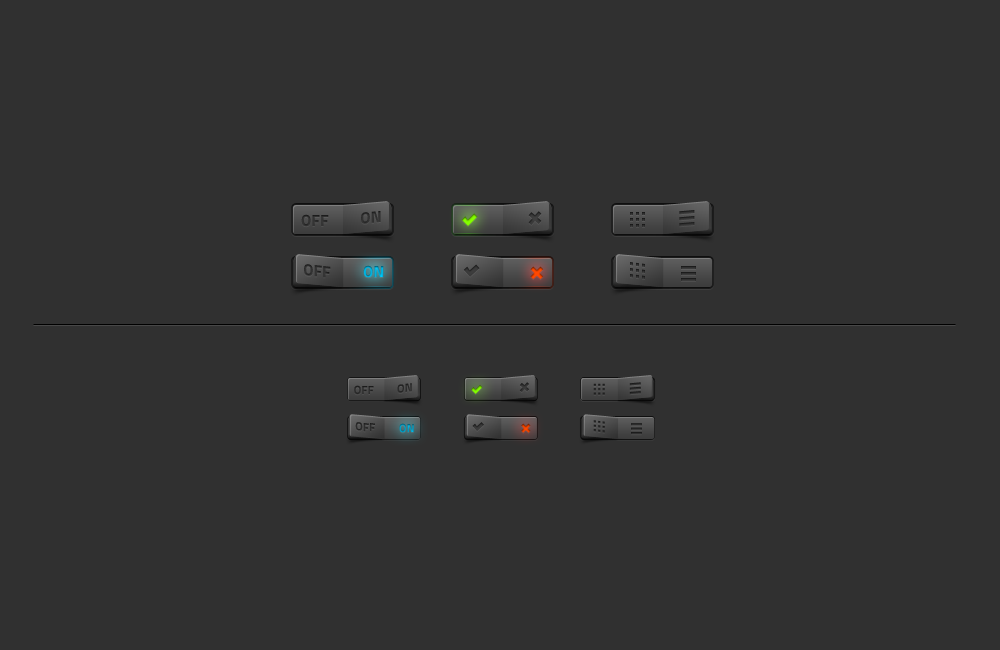
<style>
.page{position:relative;width:1000px;height:650px;background:#303030}
.page>*{position:absolute;margin:0}
.t1{font:16px "TitilliumMaps29L-999wt";color:#313131}
.t2{font:16px "TitilliumMaps29L-999wt";color:#00aed9}
.t3{font:11.7px "TitilliumMaps29L-999wt";color:#313131}
.t4{font:11.7px "TitilliumMaps29L-999wt"}
</style>
<div class="page">
<p class="t1" style="left:301px;top:214px;width:28px;height:13px">OFF</p>
<p class="t1" style="left:361px;top:211px;width:20px;height:13px;rotate:-6deg">ON</p>
<p class="t1" style="left:304px;top:264px;width:27px;height:14px;rotate:6deg">OFF</p>
<p class="t2" style="left:363px;top:265px;width:21px;height:13px">ON</p>
<p class="t3" style="left:354px;top:385px;width:20px;height:10px">OFF</p>
<p class="t3" style="left:397px;top:383px;width:15px;height:10px;rotate:-6deg">ON</p>
<p class="t3" style="left:355px;top:422px;width:20px;height:10px;rotate:6deg">OFF</p>
<p class="t4" style="left:399px;top:423px;width:15px;height:10px">ON</p>
</div>
